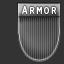
<style>
.page{position:relative;width:64px;height:64px;background:#333333}
.page>*{position:absolute;margin:0}
.t1{font:12px "OratorStd";color:#ffffff}
</style>
<div class="page">
<p class="t1" style="left:22px;top:6px;width:35px;height:8px">Armor</p>
</div>
